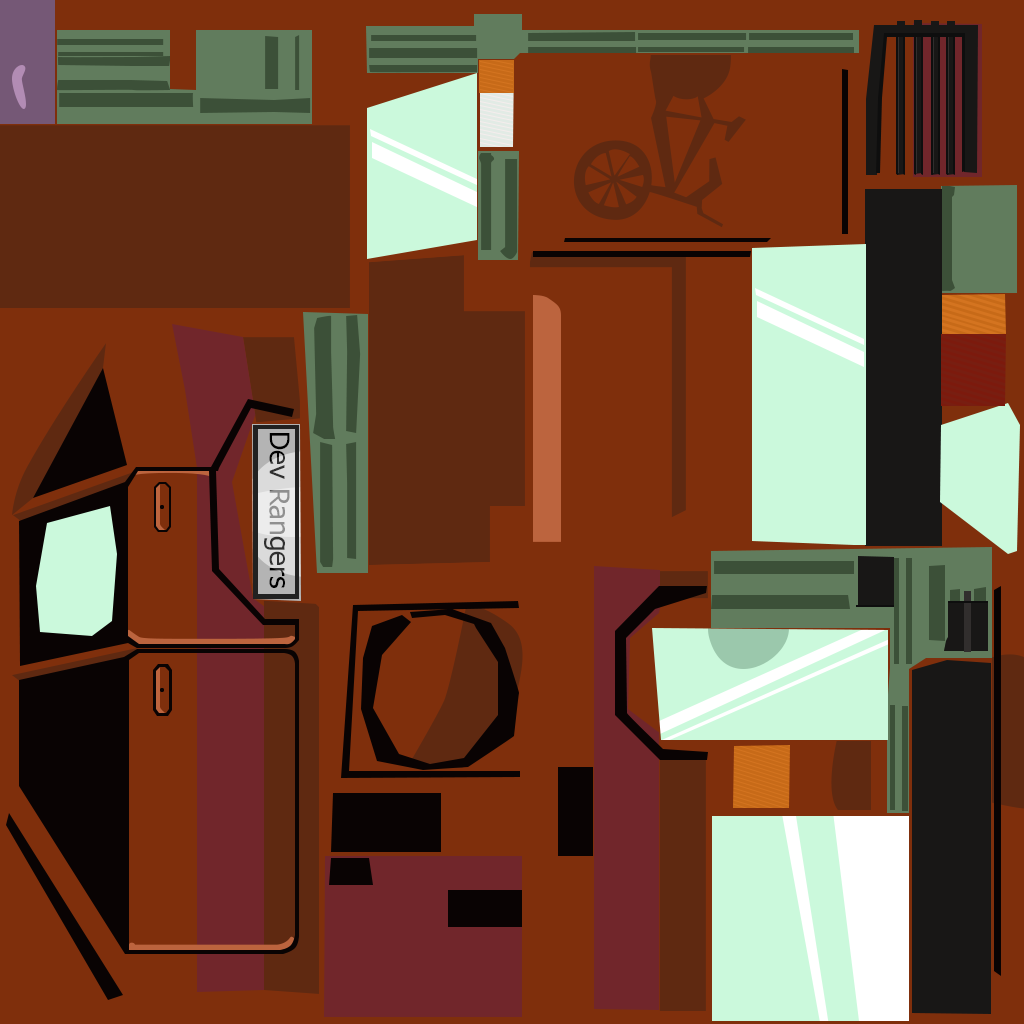
<style>
.page{position:relative;width:1024px;height:1024px;background:#7f2f0c}
.page>*{position:absolute;margin:0}
.t1{font:27.3px "Tahoma";scale:1.03 1}
</style>
<div class="page">
<p class="t1" style="left:264px;top:433px;width:26px;height:155px;rotate:90deg">Dev Rangers</p>
</div>
